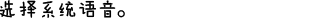
<style>
.page{position:relative;width:311px;height:18px;background:#ffffff}
.page>*{position:absolute;margin:0}
.t1{font:21px "¢è?";color:#000000}
</style>
<div class="page">
<p class="t1" style="left:0px;top:0px;width:125px;height:18px">选择系统语音。</p>
</div>
